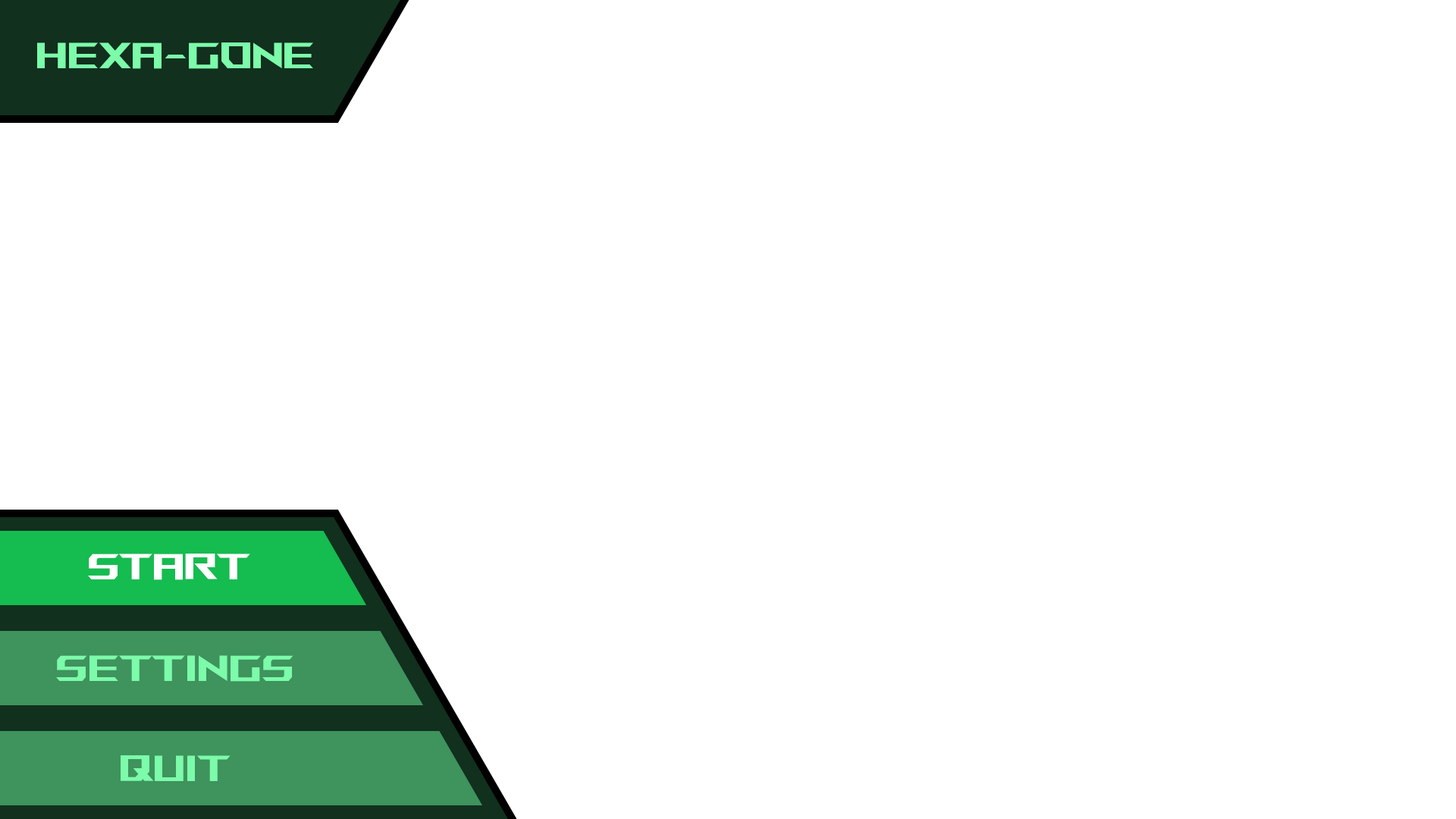
<style>
.page{position:relative;width:1456px;height:819px;background:#ffffff}
.page>*{position:absolute;margin:0}
.t1{font:36.4px "ROGFonts-Regular";color:#7cfbaa}
.t2{font:36.4px "ROGFonts-Regular";color:#ffffff}
</style>
<div class="page">
<p class="t1" style="left:37px;top:42px;width:276px;height:27px">Hexa-GONE</p>
<p class="t2" style="left:88px;top:554px;width:162px;height:26px">Start</p>
<p class="t1" style="left:56px;top:655px;width:237px;height:27px">Settings</p>
<p class="t1" style="left:121px;top:755px;width:110px;height:26px">Quit</p>
</div>
